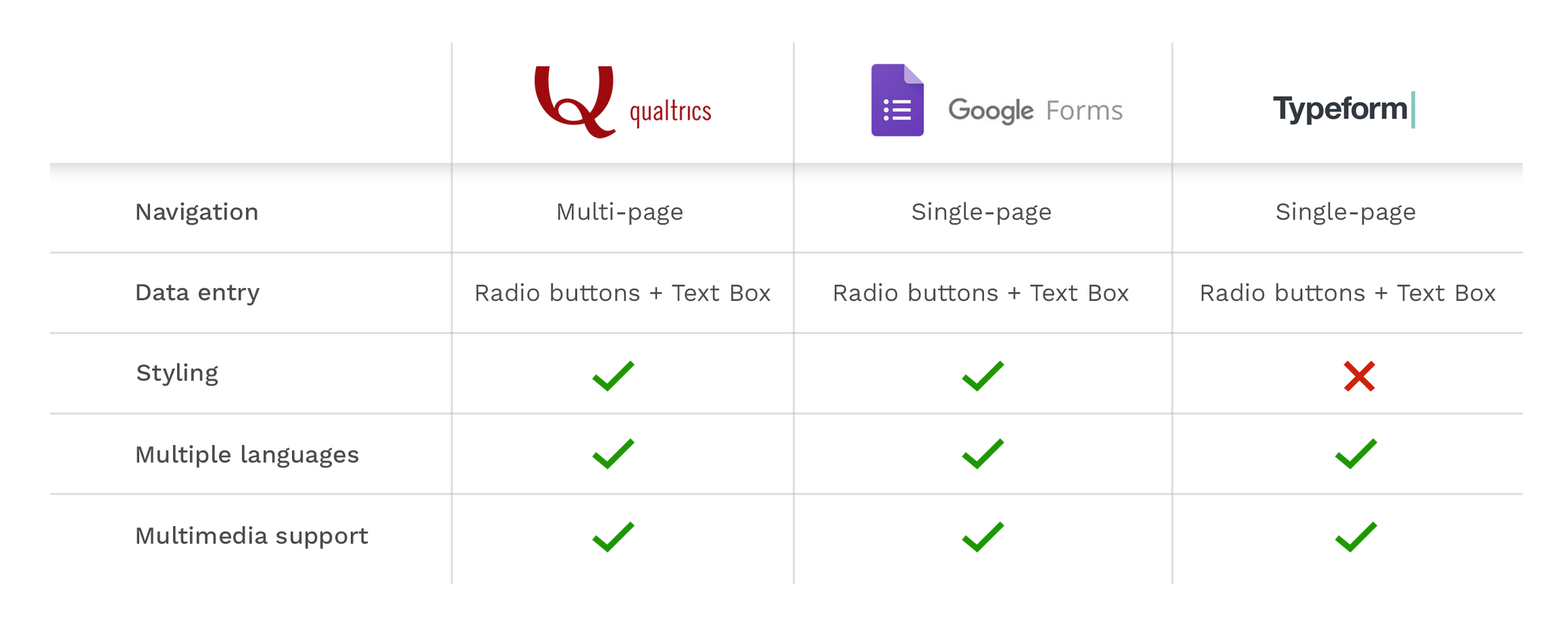
<style>
.page{position:relative;width:1568px;height:635px;background:#ffffff}
.page>*{position:absolute;margin:0}
.t1{font:24.3px "WorkSans-Medium";color:#4b4b4b}
.t2{font:24.3px "WorkSans-Regular";color:#4b4b4b}
</style>
<div class="page">
<p class="t1" style="left:137px;top:202px;width:121px;height:23px">Navigation</p>
<p class="t2" style="left:558px;top:201px;width:125px;height:24px">Multi-page</p>
<p class="t2" style="left:912px;top:201px;width:139px;height:24px">Single-page</p>
<p class="t2" style="left:1276px;top:201px;width:139px;height:24px">Single-page</p>
<p class="t1" style="left:137px;top:284px;width:123px;height:21px">Data entry</p>
<p class="t2" style="left:476px;top:283px;width:294px;height:18px">Radio buttons + Text Box</p>
<p class="t2" style="left:835px;top:283px;width:294px;height:18px">Radio buttons + Text Box</p>
<p class="t2" style="left:1202px;top:283px;width:294px;height:18px">Radio buttons + Text Box</p>
<p class="t1" style="left:137px;top:363px;width:81px;height:23px">Styling</p>
<p class="t1" style="left:137px;top:445px;width:222px;height:23px">Multiple languages</p>
<p class="t1" style="left:137px;top:526px;width:231px;height:23px">Multimedia support</p>
</div>
